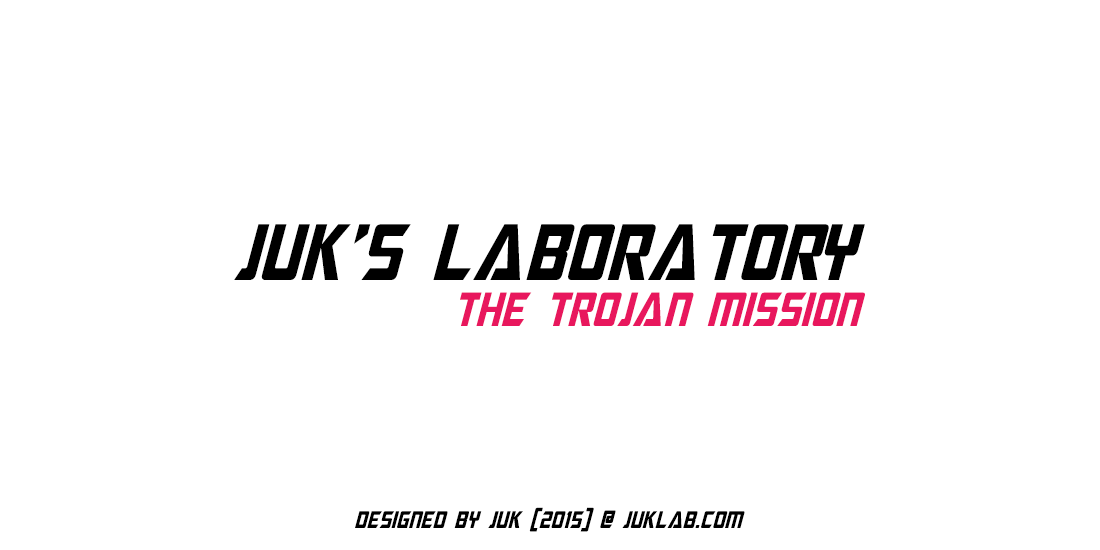
<style>
.page{position:relative;width:1100px;height:550px;background:#ffffff}
.page>*{position:absolute;margin:0}
.t1{font:80px "MegatronCondensed-Italic";color:#000000}
.t2{font:48px "MegatronCondensed-Italic";color:#e8175d}
.t3{font:24px "MegatronCondensed-Italic";color:#000000}
</style>
<div class="page">
<p class="t1" style="left:234px;top:224px;width:631px;height:56px">JUk’S LABOratory</p>
<p class="t2" style="left:460px;top:292px;width:405px;height:34px">the trojan mission</p>
<p class="t3" style="left:355px;top:507px;width:390px;height:25px">designed by juk (2015) @ juklab.com</p>
</div>
